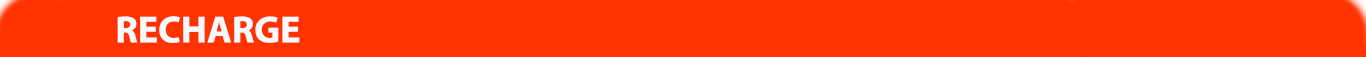
<style>
.page{position:relative;width:1366px;height:57px;background:#ff3300}
.page>*{position:absolute;margin:0}
.t1{font:38px "MyriadPro-Bold";color:#f9f9fe}
</style>
<div class="page">
<p class="t1" style="left:117px;top:16px;width:183px;height:27px">RECHARGE</p>
</div>
